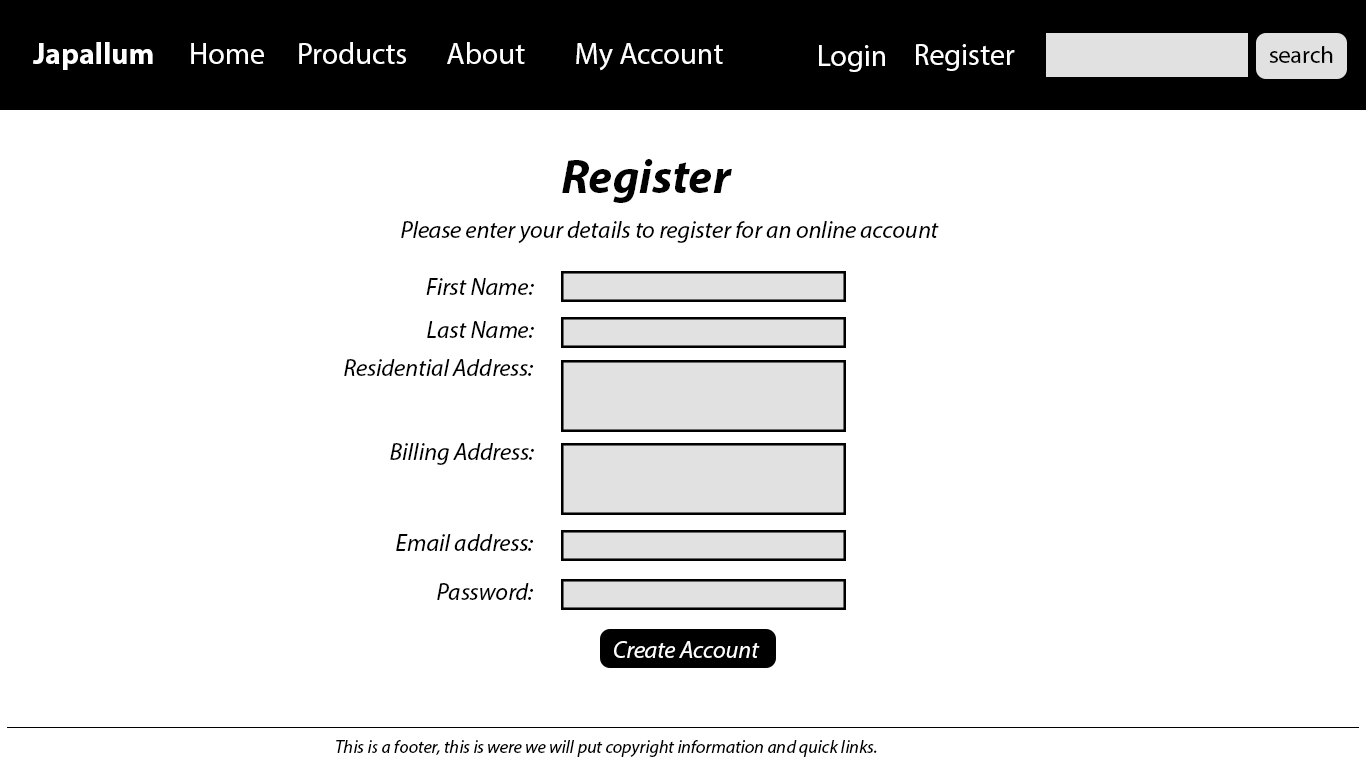
<style>
.page{position:relative;width:1366px;height:768px;background:#ffffff}
.page>*{position:absolute;margin:0}
.t1{font:30px "MyriadPro-Bold";color:#ffffff}
.t2{font:30px "MyriadPro-Regular";color:#ffffff}
.t3{font:24px "MyriadPro-Regular";color:#010101}
.t4{font:48px "MyriadPro-BoldIt";color:#010101}
.t5{font:24px "MyriadPro-It";color:#000000}
.t6{font:24px "MyriadPro-It";color:#ffffff}
.t7{font:18px "MyriadPro-It";color:#000000}
</style>
<div class="page">
<p class="t1" style="left:33px;top:42px;width:120px;height:28px">Japallum</p>
<p class="t2" style="left:191px;top:43px;width:73px;height:21px">Home</p>
<p class="t2" style="left:299px;top:42px;width:107px;height:22px">Products</p>
<p class="t2" style="left:447px;top:42px;width:78px;height:22px">About</p>
<p class="t2" style="left:576px;top:43px;width:147px;height:28px">My Account</p>
<p class="t2" style="left:819px;top:45px;width:66px;height:27px">Login</p>
<p class="t2" style="left:916px;top:44px;width:99px;height:27px">Register</p>
<p class="t3" style="left:1269px;top:46px;width:64px;height:17px">search</p>
<p class="t4" style="left:562px;top:159px;width:170px;height:44px">Register</p>
<p class="t5" style="left:401px;top:221px;width:538px;height:23px">Please enter your details to register for an online account</p>
<p class="t5" style="left:426px;top:278px;width:108px;height:17px">First Name:</p>
<p class="t5" style="left:427px;top:321px;width:107px;height:17px">Last Name:</p>
<p class="t5" style="left:344px;top:359px;width:190px;height:17px">Residential Address:</p>
<p class="t5" style="left:390px;top:443px;width:144px;height:22px">Billing Address:</p>
<p class="t5" style="left:396px;top:534px;width:138px;height:17px">Email address:</p>
<p class="t5" style="left:437px;top:583px;width:97px;height:17px">Password:</p>
<p class="t6" style="left:614px;top:641px;width:146px;height:17px">Create Account</p>
<p class="t7" style="left:336px;top:740px;width:541px;height:17px">This is a footer, this is were we will put copyright information and quick links.</p>
</div>
